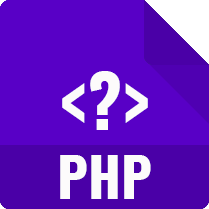
<style>
.page{position:relative;width:209px;height:209px;background:#5800c6}
.page>*{position:absolute;margin:0}
.t1{font:70.8px "Oswald-Bold";color:#fcfbfb}
.t2{font:54.2px "Oswald-Bold";color:#fcfbfb}
</style>
<div class="page">
<p class="t1" style="left:62px;top:71px;width:86px;height:59px">&lt;?&gt;</p>
<p class="t2" style="left:60px;top:155px;width:91px;height:44px">PHP</p>
</div>
